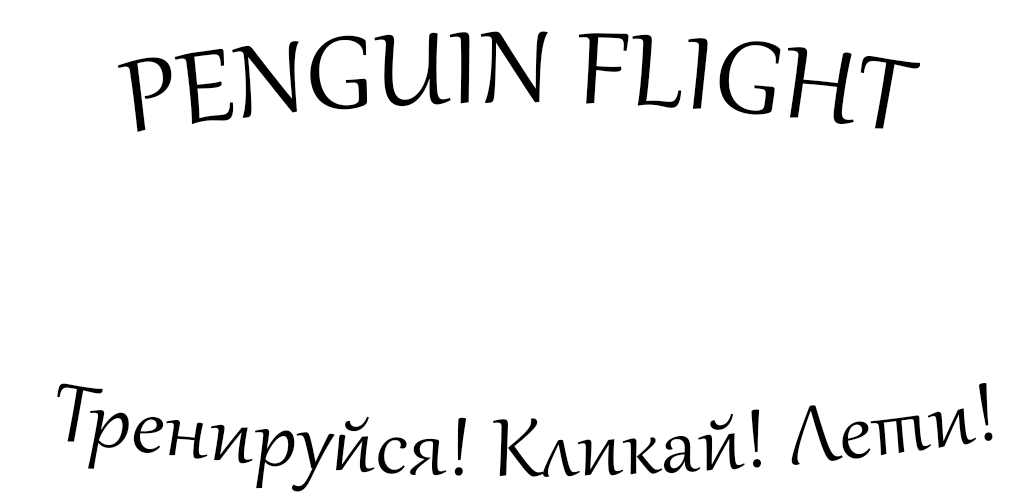
<style>
.page{position:relative;width:1024px;height:500px;background:#ffffff}
.page>*{position:absolute;margin:0}
.t1{font:125px "Gabriola";letter-spacing:0.015em;color:#000000}
.t2{font:100px "Gabriola";letter-spacing:0.015em;color:#000000}
</style>
<div class="page">
<p class="t1" style="left:117px;top:31px;width:804px;height:101px">PENGUIN FLIGHT</p>
<p class="t2" style="left:57px;top:383px;width:936px;height:109px">Тренируйся! Кликай! Лети!</p>
</div>
